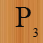
<style>
.page{position:relative;width:43px;height:43px}
.page>*{position:absolute;margin:0}
.t1{font:30px "TimesNewRomanPSMT";color:#0c0c0b}
.t2{font:12px "TimesNewRomanPSMT";color:#0c0c0b}
</style>
<div class="page">
<p class="t1" style="left:15px;top:7px;width:16px;height:20px">P</p>
<p class="t2" style="left:33px;top:28px;width:5px;height:9px">3</p>
</div>
